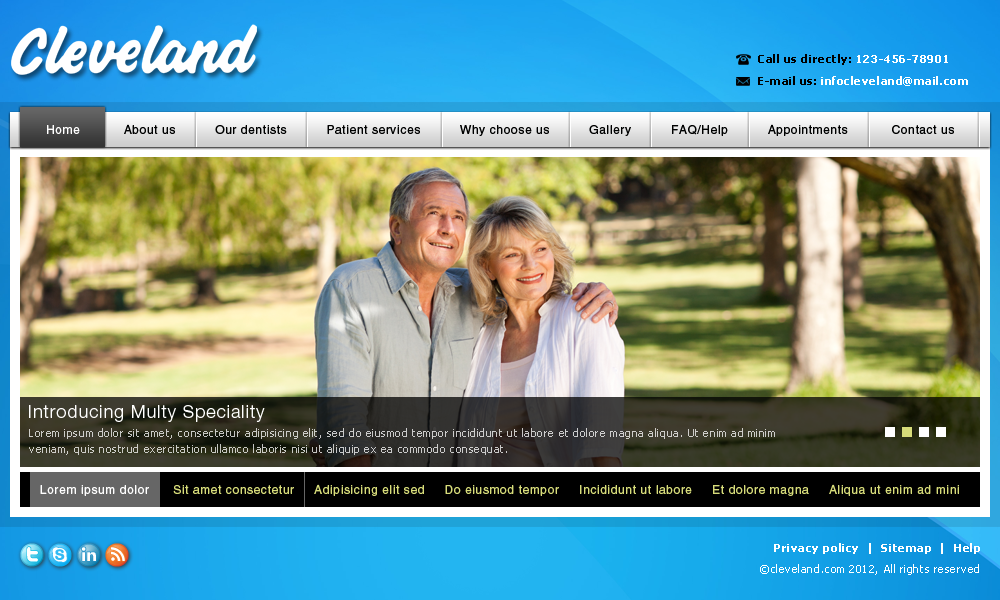
<style>
.page{position:relative;width:1000px;height:600px}
.page>*{position:absolute;margin:0}
.t1{font:11px "Tahoma-Bold";letter-spacing:0.05em;color:#000000}
.t2{font:11px "Tahoma-Bold";letter-spacing:0.05em;color:#ffffff}
.t3{font:12px "Helvetica";letter-spacing:0.05em;color:#000101}
.t4{font:12px "Helvetica";letter-spacing:0.05em;color:#ffffff}
.t5{font:18px "HelveticaNeue-Light";letter-spacing:0.05em;color:#ffffff}
.t6{font:11px/16px "Tahoma";letter-spacing:0.05em;color:#cccbc9}
.t7{font:12px "Helvetica";letter-spacing:0.05em;color:#d7dc7a}
.t8{font:11px "Tahoma";letter-spacing:0.05em;color:#ffffff}
</style>
<div class="page">
<p class="t1" style="left:758px;top:54px;width:190px;height:11px">Call us directly:<span class="t2"> 123-456-78901</span></p>
<p class="t2" style="left:758px;top:76px;width:210px;height:10px"><span class="t1">E-mail us:</span> infocleveland@mail.com</p>
<p class="t3" style="left:47px;top:124px;width:907px;height:12px"><span class="t4">Home</span>           About us          Our dentists          Patient services          Why choose us          Gallery          FAQ/Help          Appointments           Contact us</p>
<p class="t5" style="left:29px;top:405px;width:236px;height:17px">Introducing Multy Speciality</p>
<p class="t6" style="left:29px;top:428px;width:746px;height:27px">Lorem ipsum dolor sit amet, consectetur adipisicing elit, sed do eiusmod tempor incididunt ut labore et dolore magna aliqua. Ut enim ad minim veniam, quis nostrud exercitation ullamco laboris nisi ut aliquip ex ea commodo consequat.</p>
<p class="t7" style="left:40px;top:484px;width:919px;height:12px"><span class="t4">Lorem ipsum dolor</span>      Sit amet consectetur     Adipisicing elit sed     Do eiusmod tempor     Incididunt ut labore     Et dolore magna     Aliqua ut enim ad mini</p>
<p class="t2" style="left:774px;top:543px;width:206px;height:11px">Privacy policy  |  Sitemap  |  Help</p>
<p class="t8" style="left:760px;top:564px;width:219px;height:11px">©cleveland.com 2012, All rights reserved</p>
</div>
